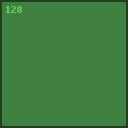
<style>
.page{position:relative;width:128px;height:128px;background:#408040}
.page>*{position:absolute;margin:0}
.t1{font:9px "Verdana-Bold";letter-spacing:-0.025em;color:#63c663;text-transform:uppercase}
</style>
<div class="page">
<p class="t1" style="left:6px;top:6px;width:16px;height:7px">128</p>
</div>
